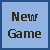
<style>
.page{position:relative;width:50px;height:50px;background:#90b3e2}
.page>*{position:absolute;margin:0}
.t1{font:14px "Calibri-Bold";letter-spacing:0.01em;color:#372b17}
</style>
<div class="page">
<p class="t1" style="left:8px;top:12px;width:33px;height:26px;text-align:center">New<br>Game</p>
</div>
